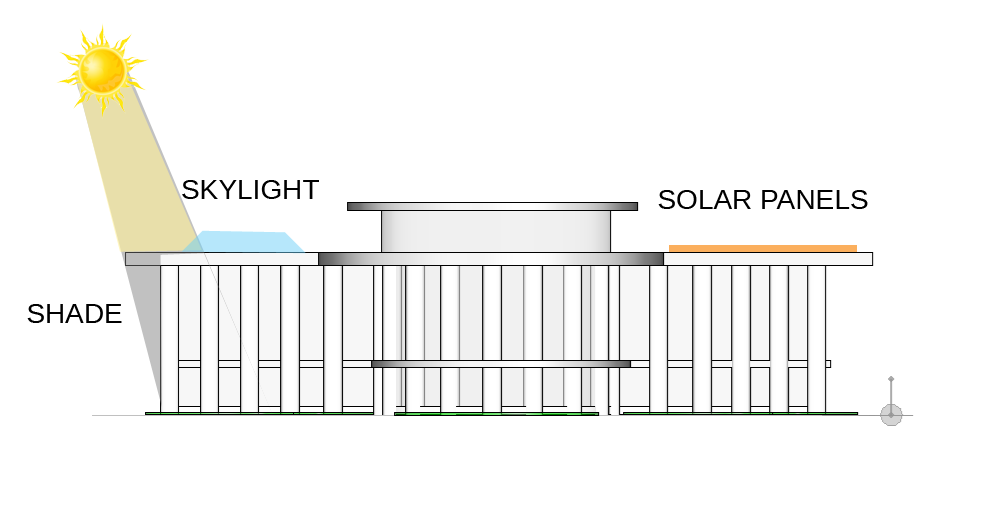
<style>
.page{position:relative;width:993px;height:529px;background:#ffffff}
.page>*{position:absolute;margin:0}
.t1{font:28px "Arimo";color:#000000}
</style>
<div class="page">
<p class="t1" style="left:182px;top:180px;width:137px;height:19px">SKYLIGHT</p>
<p class="t1" style="left:658px;top:190px;width:210px;height:19px">SOLAR PANELS</p>
<p class="t1" style="left:27px;top:304px;width:95px;height:19px">SHADE</p>
</div>
